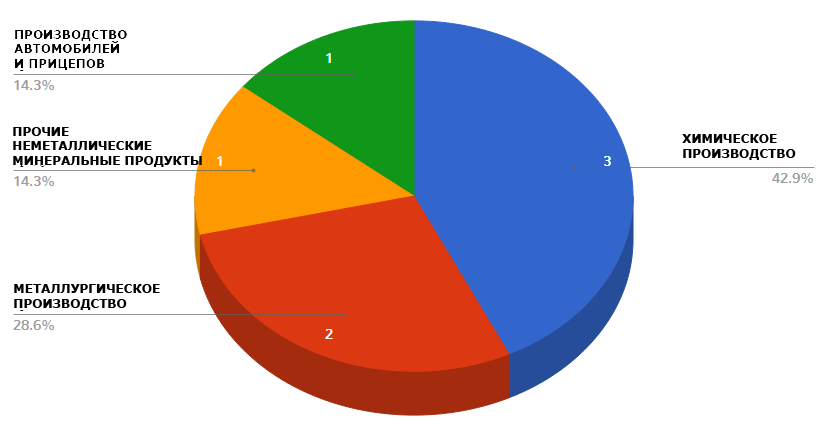
<style>
.page{position:relative;width:820px;height:435px;background:#ffffff}
.page>*{position:absolute;margin:0}
.t1{font:12px "Verdana-Bold";color:#000000}
</style>
<div class="page">
<p class="t1" style="left:13px;top:127px;width:189px;height:40px">ПРОЧИЕ<br>НЕМЕТАЛЛИЧЕСКИЕ<br>МИНЕРАЛЬНЫЕ ПРОДУКТЫ</p>
<p class="t1" style="left:682px;top:134px;width:114px;height:26px">ХИМИЧЕСКОЕ <br>ПРОИЗВОДСТВО</p>
<p class="t1" style="left:14px;top:284px;width:146px;height:26px">МЕТАЛЛУРГИЧЕСКОЕ<br>ПРОИЗВОДСТВО</p>
</div>
